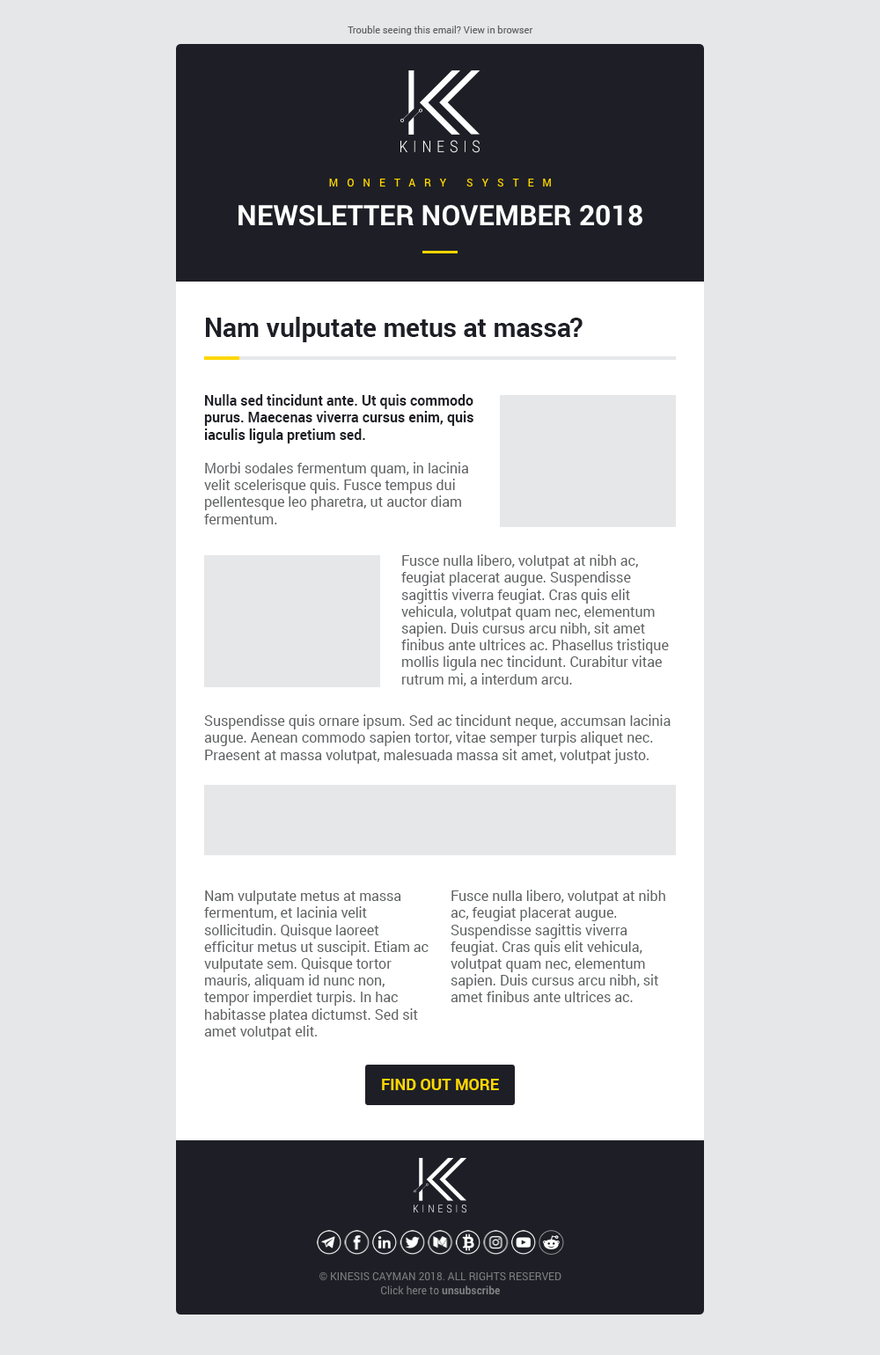
<style>
.page{position:relative;width:880px;height:1355px;background:#e6e7e8}
.page>*{position:absolute;margin:0}
.t1{font:9.7px "Roboto-Regular";color:#5f6162}
.t2{font:26.4px "Roboto-Bold";color:#1e1f26}
.t3{font:14.1px "Roboto-Regular";color:#5f6162}
.t4{font:14.1px "Roboto-Bold";color:#1e1f26}
.t5{font:15.8px "Roboto-Bold";color:#ffd700;text-transform:uppercase}
</style>
<div class="page">
<p class="t1" style="left:348px;top:26px;width:185px;height:9px">Trouble seeing this email? View in browser</p>
<p class="t2" style="left:206px;top:317px;width:377px;height:25px">Nam vulputate metus at massa?</p>
<p class="t3" style="left:204px;top:394px;width:269px;height:130px"><span class="t4">Nulla sed tincidunt ante. Ut quis commodo purus. Maecenas viverra cursus enim, quis iaculis ligula pretium sed.<br><br></span>Morbi sodales fermentum quam, in lacinia velit scelerisque quis. Fusce tempus dui pellentesque leo pharetra, ut auctor diam fermentum.</p>
<p class="t3" style="left:401px;top:554px;width:268px;height:132px">Fusce nulla libero, volutpat at nibh ac, feugiat placerat augue. Suspendisse sagittis viverra feugiat. Cras quis elit vehicula, volutpat quam nec, elementum sapien. Duis cursus arcu nibh, sit amet finibus ante ultrices ac. Phasellus tristique mollis ligula nec tincidunt. Curabitur vitae rutrum mi, a interdum arcu.</p>
<p class="t3" style="left:204px;top:715px;width:467px;height:49px">Suspendisse quis ornare ipsum. Sed ac tincidunt neque, accumsan lacinia augue. Aenean commodo sapien tortor, vitae semper turpis aliquet nec. Praesent at massa volutpat, malesuada massa sit amet, volutpat justo.</p>
<p class="t3" style="left:204px;top:891px;width:225px;height:149px">Nam vulputate metus at massa fermentum, et lacinia velit sollicitudin. Quisque laoreet efficitur metus ut suscipit. Etiam ac vulputate sem. Quisque tortor mauris, aliquam id nunc non, tempor imperdiet turpis. In hac habitasse platea dictumst. Sed sit amet volutpat elit.</p>
<p class="t3" style="left:451px;top:890px;width:214px;height:112px">Fusce nulla libero, volutpat at nibh ac, feugiat placerat augue. Suspendisse sagittis viverra feugiat. Cras quis elit vehicula, volutpat quam nec, elementum sapien. Duis cursus arcu nibh, sit amet finibus ante ultrices ac.</p>
<p class="t5" style="left:382px;top:1079px;width:117px;height:11px">FIND OUT MORE</p>
</div>
